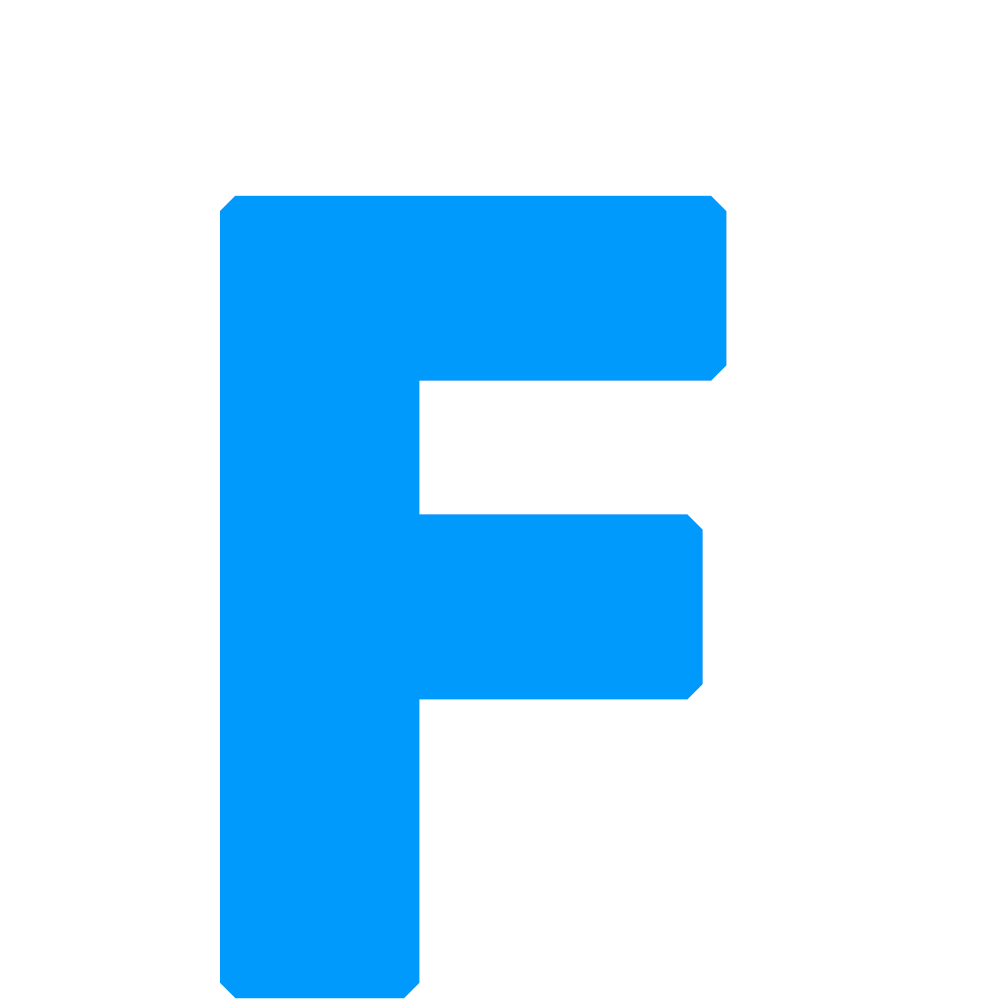
<style>
.page{position:relative;width:1000px;height:1000px;background:#ffffff}
.page>*{position:absolute;margin:0}
.t1{font:1158.6px "Klavika-Bold";color:#009afc;text-transform:uppercase;font-weight:bold;scale:0.97 1}
</style>
<div class="page">
<p class="t1" style="left:220px;top:195px;width:507px;height:804px">f</p>
</div>
